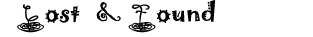
<style>
.page{position:relative;width:313px;height:37px;background:#ffffff}
.page>*{position:absolute;margin:0}
.t1{font:24px "Jokerman-Regular";color:#030303}
.t2{font:30px "KAPastaAldente";color:#030303}
.t3{font:30px "Gigi-Regular";color:#030303}
</style>
<div class="page">
<p class="t1" style="left:17px;top:0px;width:199px;height:33px"><span class="t2">L</span>ost <span class="t3">&amp; </span><span class="t2">F</span>ound</p>
</div>
